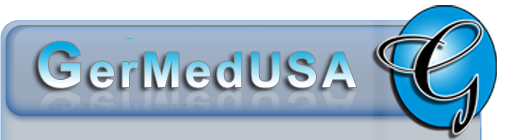
<style>
.page{position:relative;width:513px;height:140px}
.page>*{position:absolute;margin:0}
.t1{font:48px "Arial-BoldMT";letter-spacing:0.075em}
.t2{font:62px "Arial-BoldMT";letter-spacing:0.075em}
</style>
<div class="page">
<p class="t1" style="left:38px;top:41px;width:319px;height:47px"><span class="t2">G</span>erMedUSA</p>
</div>
